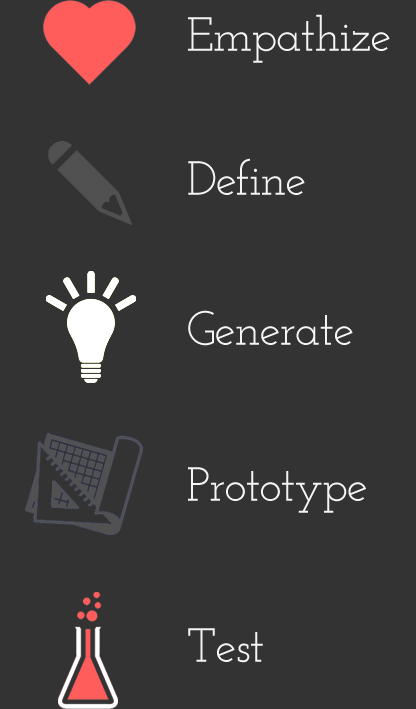
<style>
.page{position:relative;width:416px;height:709px;background:#333333}
.page>*{position:absolute;margin:0}
.t1{font:48px "JosefinSlab";letter-spacing:-0.025em;color:#f5f5f5}
</style>
<div class="page">
<p class="t1" style="left:188px;top:14px;width:202px;height:49px">Empathize</p>
<p class="t1" style="left:188px;top:158px;width:117px;height:37px">Define</p>
<p class="t1" style="left:188px;top:310px;width:165px;height:36px">Generate</p>
<p class="t1" style="left:188px;top:467px;width:178px;height:46px">Prototype</p>
<p class="t1" style="left:188px;top:628px;width:75px;height:35px">Test</p>
</div>
